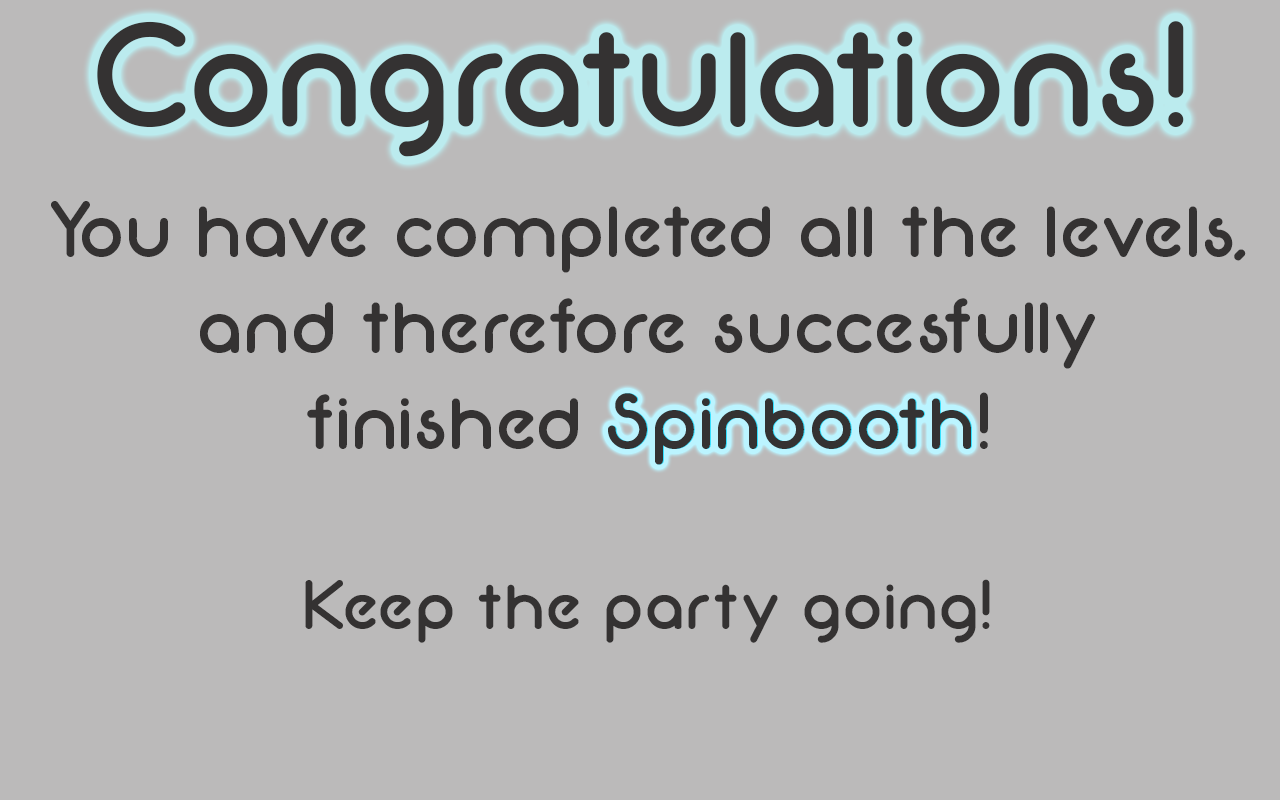
<style>
.page{position:relative;width:1280px;height:800px;background:#bbbaba}
.page>*{position:absolute;margin:0}
.t1{font:150px "Neon80s";color:#343232}
.t2{font:80px "Neon80s";color:#343232}
.t3{font:70px "Neon80s";color:#343232}
</style>
<div class="page">
<p class="t1" style="left:97px;top:21px;width:1087px;height:136px">Congratulations!</p>
<p class="t2" style="left:51px;top:201px;width:1195px;height:442px;text-align:center">You have completed all the levels, and therefore succesfully <br>finished Spinbooth!<br><br><span class="t3">Keep the party going!</span></p>
<p class="t2" style="left:608px;top:393px;width:363px;height:72px">Spinbooth</p>
</div>
